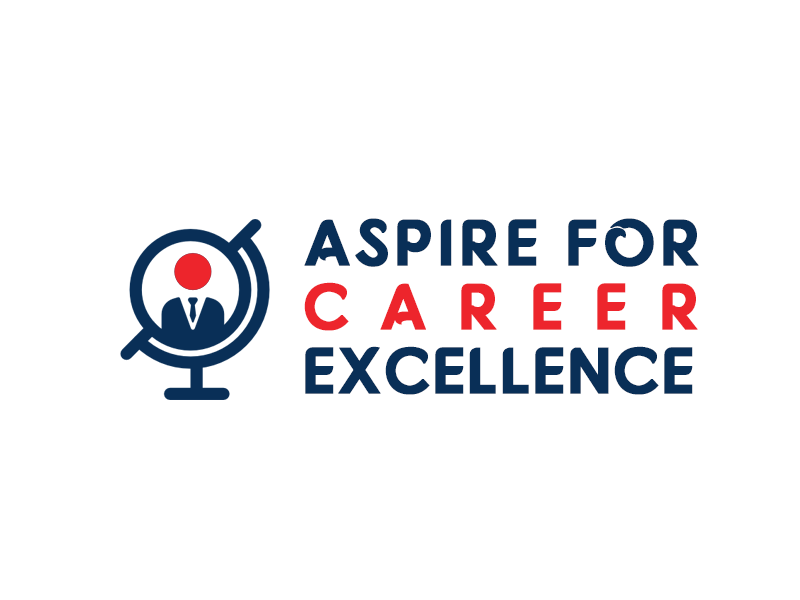
<style>
.page{position:relative;width:800px;height:600px;background:#ffffff}
.page>*{position:absolute;margin:0}
.t1{font:65.1px/63.9px "Fonarto";letter-spacing:0.06em;color:#092f57;text-transform:uppercase;font-weight:bold}
.t2{font:65.1px/63.9px "Fonarto";letter-spacing:0.46em;color:#ed252c;text-transform:uppercase;font-weight:bold}
.t3{font:65.1px/63.9px "Fonarto";color:#092f57;text-transform:uppercase;font-weight:bold}
</style>
<div class="page">
<p class="t1" style="left:304px;top:218px;width:395px;height:177px">Aspire for<br><span class="t2">Career <br></span><span class="t3">Excellence</span></p>
</div>
